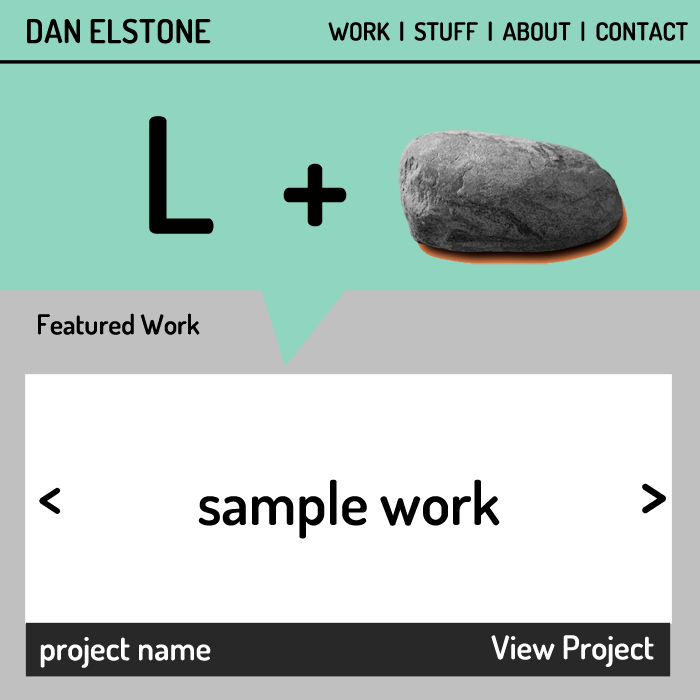
<style>
.page{position:relative;width:700px;height:700px;background:#90d5bf}
.page>*{position:absolute;margin:0}
.t1{font:32.9px "Dosis-SemiBold";color:#000000}
.t2{font:24.7px "Dosis-SemiBold";color:#000000}
.t3{font:160.6px "Dosis-SemiBold";color:#000000}
.t4{font:27.5px "Dosis-SemiBold";color:#000000}
.t5{font:59.7px "Dosis-SemiBold";color:#000000}
.t6{font:67.9px "Dosis-SemiBold";color:#000000}
.t7{font:32.9px "Dosis-SemiBold";color:#ffffff}
.t8{font:32.9px "Dosis-SemiBold";color:#fffeff}
</style>
<div class="page">
<p class="t1" style="left:27px;top:18px;width:184px;height:26px">DAN ELSTONE</p>
<p class="t2" style="left:328px;top:21px;width:360px;height:20px">WORK  |  STUFF  |  ABOUT  |  CONTACT</p>
<p class="t3" style="left:149px;top:116px;width:198px;height:118px">L  +</p>
<p class="t4" style="left:38px;top:313px;width:162px;height:22px">Featured Work</p>
<p class="t5" style="left:198px;top:479px;width:302px;height:60px">sample work</p>
<p class="t6" style="left:642px;top:483px;width:24px;height:31px">&gt;</p>
<p class="t5" style="left:39px;top:487px;width:22px;height:27px">&lt;</p>
<p class="t7" style="left:40px;top:637px;width:171px;height:31px">project name</p>
<p class="t8" style="left:491px;top:635px;width:163px;height:32px">View Project</p>
</div>
